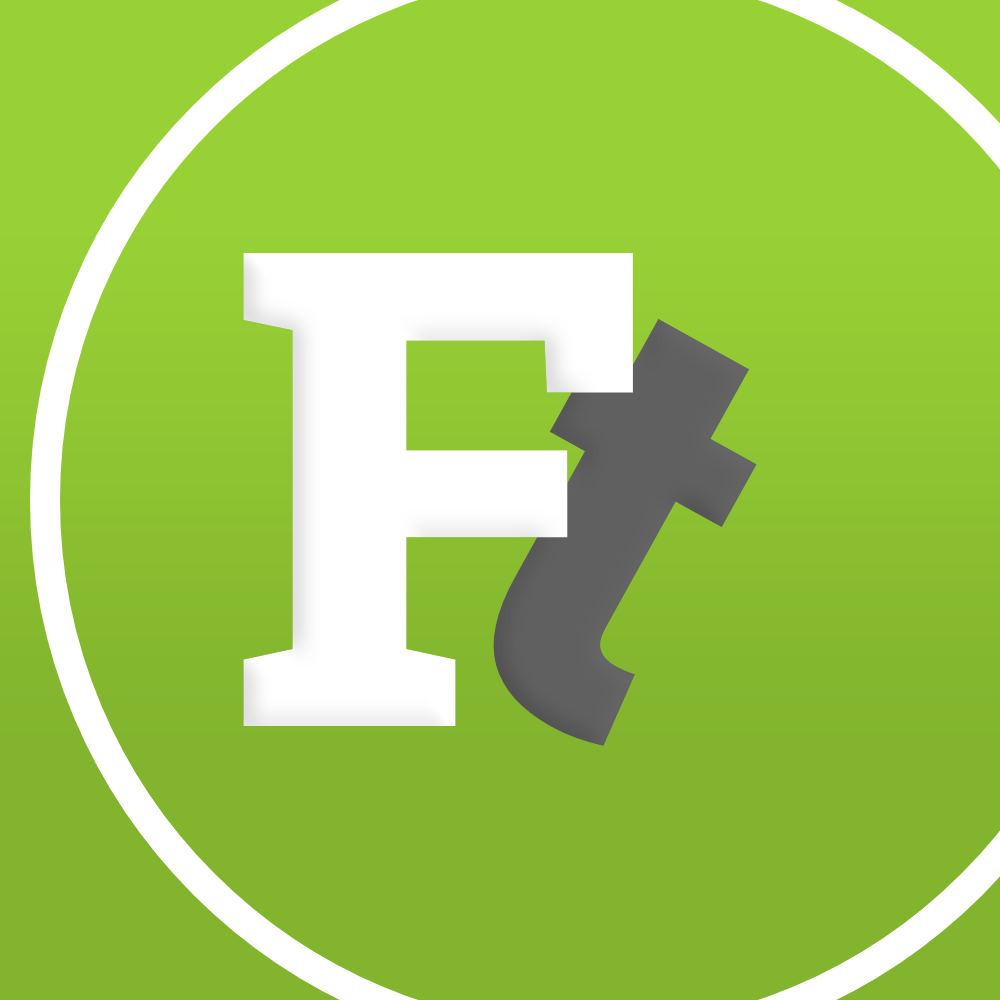
<style>
.page{position:relative;width:1000px;height:1000px;background:#82b42d}
.page>*{position:absolute;margin:0}
.t1{font:665.3px "RobotoSlab-Black";color:#ffffff}
.t2{font:609.8px "RobotoSlab-Black";color:#606060}
</style>
<div class="page">
<p class="t1" style="left:243px;top:253px;width:390px;height:473px">F</p>
<p class="t2" style="left:493px;top:318px;width:264px;height:428px;rotate:29deg">t</p>
</div>
